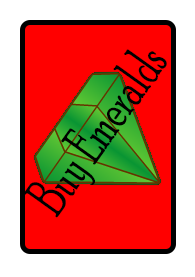
<style>
.page{position:relative;width:195px;height:277px;background:#ff0000}
.page>*{position:absolute;margin:0}
.t1{font:58px "PoorRichard-Regular";color:#000000;scale:0.64 1}
</style>
<div class="page">
<p class="t1" style="left:23px;top:49px;width:144px;height:169px;rotate:-54deg">Buy Emeralds</p>
</div>
